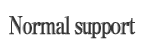
<style>
.page{position:relative;width:167px;height:49px;background:#ffffff}
.page>*{position:absolute;margin:0}
.t1{font:24px "RyuminPro-ExBold";letter-spacing:-0.1em;font-weight:bold;scale:0.8 1}
</style>
<div class="page">
<p class="t1" style="left:9px;top:16px;width:127px;height:23px">Normal support</p>
</div>
